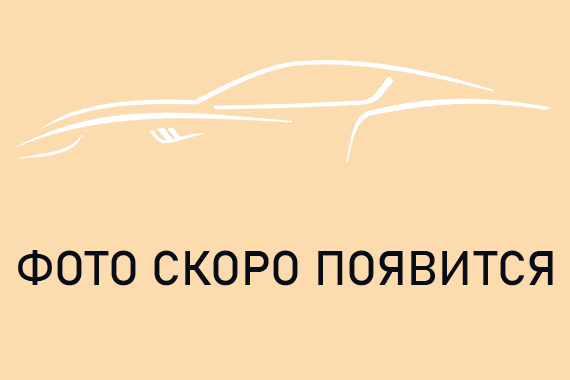
<style>
.page{position:relative;width:570px;height:380px;background:#fcdbaf}
.page>*{position:absolute;margin:0}
.t1{font:48px "Bahnschrift";color:#060d18}
</style>
<div class="page">
<p class="t1" style="left:18px;top:250px;width:535px;height:36px">ФОТО СКОРО ПОЯВИТСЯ</p>
</div>
